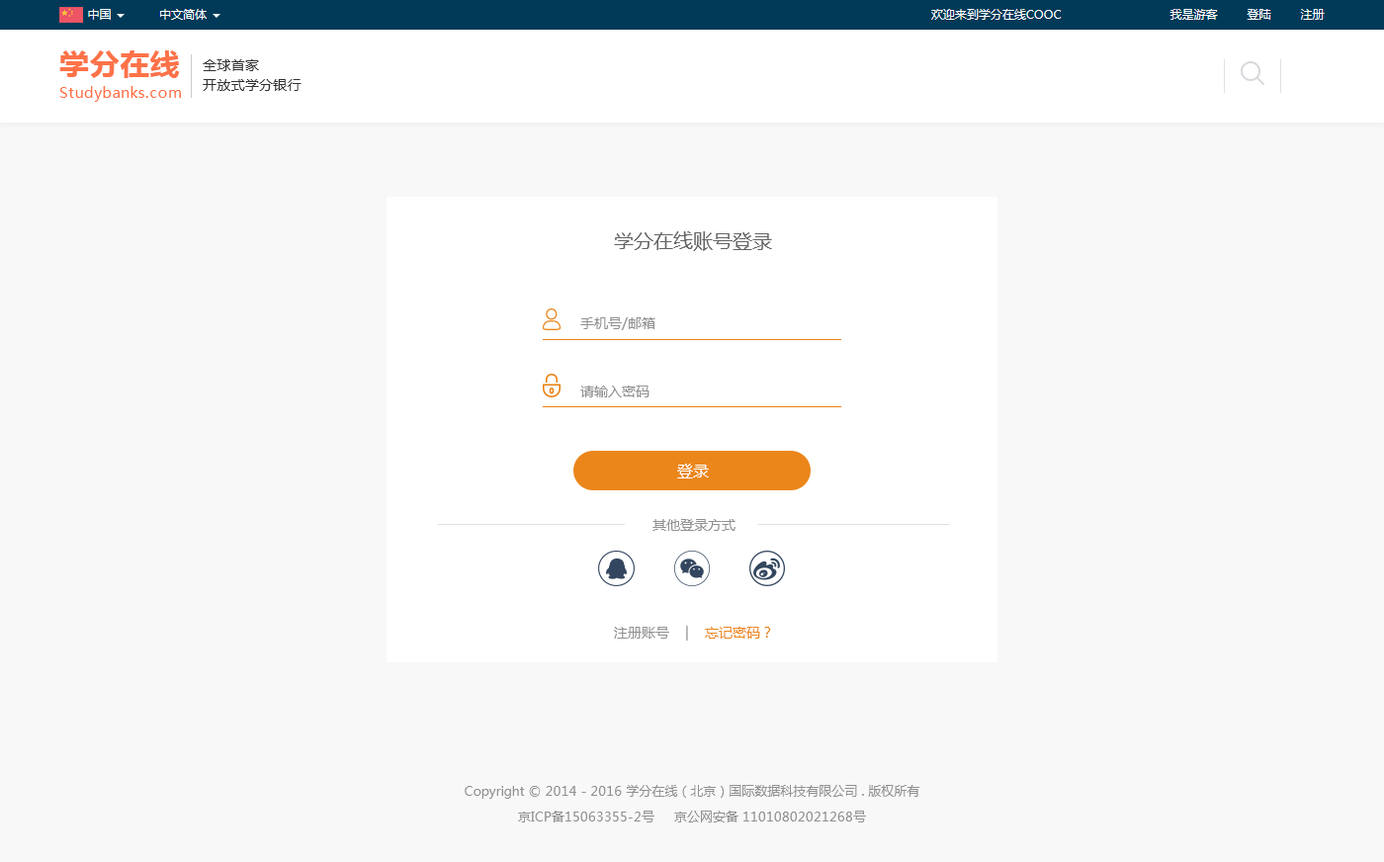
<style>
.page{position:relative;width:1384px;height:862px;background:#f8f8f8}
.page>*{position:absolute;margin:0}
.t1{font:14.8px/23.7px "MicrosoftYaHei";letter-spacing:0.02em;color:#fe7248}
.t2{font:29.6px/23.7px "MicrosoftYaHei-Bold";letter-spacing:0.02em;color:#fe7248}
.t3{font:13.8px/19.8px "MicrosoftYaHei";letter-spacing:0.02em;color:#323232}
.t4{font:19.8px "MicrosoftYaHei";color:#646464}
.t5{font:13.8px "MicrosoftYaHei";color:#909090}
.t6{font:15.8px "MicrosoftYaHei";color:#ffffff}
.t7{font:13.8px "MicrosoftYaHei";color:#eb861b}
.t8{font:12.8px/25.7px "MicrosoftYaHei";color:#909090}
</style>
<div class="page">
<p class="t1" style="left:59px;top:50px;width:122px;height:52px"><span class="t2">学分在线<br></span>Studybanks.com</p>
<p class="t3" style="left:203px;top:59px;width:98px;height:32px">全球首家<br>开放式学分银行</p>
<p class="t4" style="left:614px;top:231px;width:158px;height:20px">学分在线账号登录</p>
<p class="t5" style="left:580px;top:317px;width:75px;height:13px">手机号/邮箱</p>
<p class="t5" style="left:580px;top:385px;width:69px;height:12px">请输入密码</p>
<p class="t6" style="left:677px;top:464px;width:32px;height:14px">登录</p>
<p class="t5" style="left:652px;top:519px;width:83px;height:12px">其他登录方式</p>
<p class="t5" style="left:614px;top:626px;width:157px;height:14px">注册账号    |    <span class="t7">忘记密码？</span></p>
<p class="t8" style="left:465px;top:785px;width:454px;height:37px;text-align:center">Copyright © 2014 - 2016 学分在线（北京）国际数据科技有限公司 . 版权所有<br>京ICP备15063355-2号     京公网安备 11010802021268号</p>
</div>
